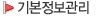
<style>
.page{position:relative;width:99px;height:18px;background:#ffffff}
.page>*{position:absolute;margin:0}
.t1{font:14.7px "YDIYGO330";letter-spacing:-0.03em;color:#373737;scale:0.92 1}
</style>
<div class="page">
<p class="t1" style="left:17px;top:1px;width:72px;height:14px">기본정보관리</p>
</div>
